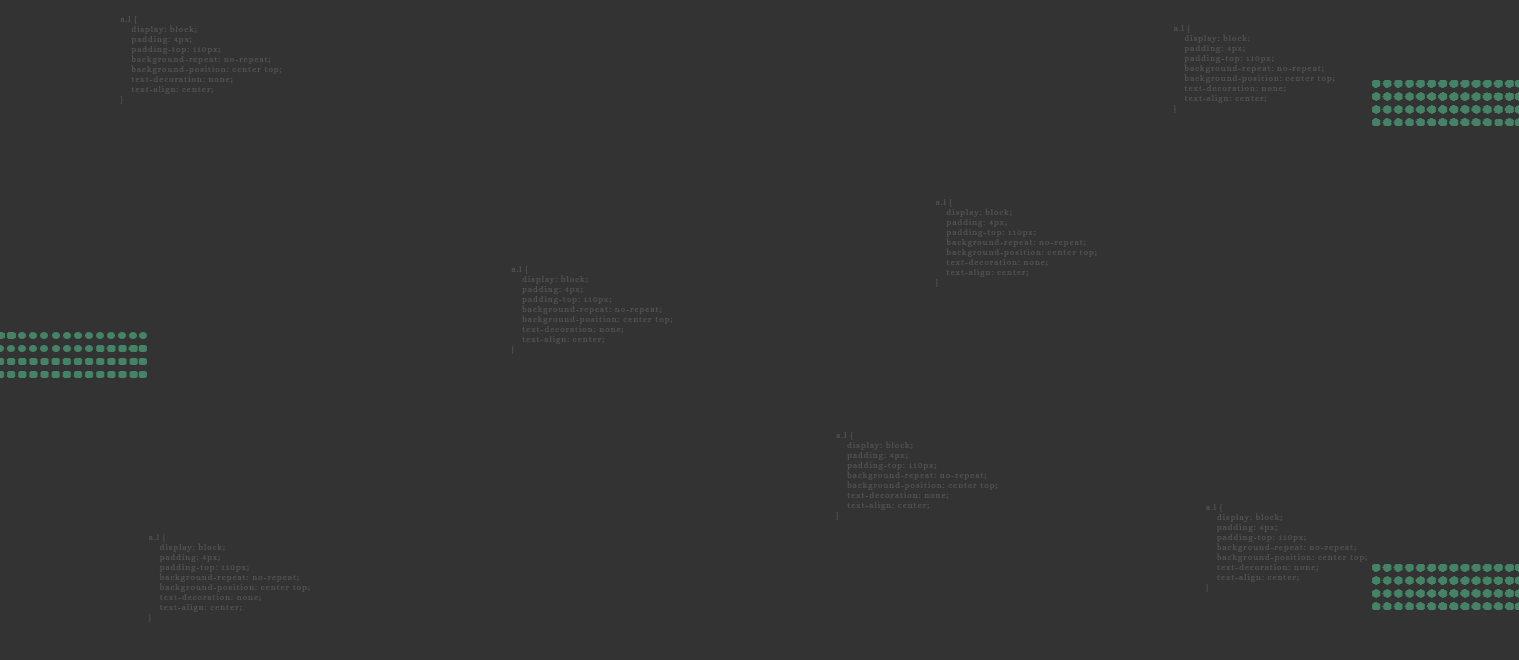
<style>
.page{position:relative;width:1519px;height:660px;background:#333333}
.page>*{position:absolute;margin:0}
.t1{font:8.3px "Alice-Regular";letter-spacing:0.1em;color:#525252}
</style>
<div class="page">
<p class="t1" style="left:120px;top:16px;width:162px;height:88px">a.l {<br>    display: block;<br>    padding: 4px;<br>    padding-top: 110px;<br>    background-repeat: no-repeat;<br>    background-position: center top;<br>    text-decoration: none;<br>    text-align: center;<br>}</p>
<p class="t1" style="left:1173px;top:25px;width:162px;height:88px">a.l {<br>    display: block;<br>    padding: 4px;<br>    padding-top: 110px;<br>    background-repeat: no-repeat;<br>    background-position: center top;<br>    text-decoration: none;<br>    text-align: center;<br>}</p>
<p class="t1" style="left:935px;top:199px;width:162px;height:88px">a.l {<br>    display: block;<br>    padding: 4px;<br>    padding-top: 110px;<br>    background-repeat: no-repeat;<br>    background-position: center top;<br>    text-decoration: none;<br>    text-align: center;<br>}</p>
<p class="t1" style="left:511px;top:266px;width:162px;height:88px">a.l {<br>    display: block;<br>    padding: 4px;<br>    padding-top: 110px;<br>    background-repeat: no-repeat;<br>    background-position: center top;<br>    text-decoration: none;<br>    text-align: center;<br>}</p>
<p class="t1" style="left:836px;top:432px;width:162px;height:88px">a.l {<br>    display: block;<br>    padding: 4px;<br>    padding-top: 110px;<br>    background-repeat: no-repeat;<br>    background-position: center top;<br>    text-decoration: none;<br>    text-align: center;<br>}</p>
<p class="t1" style="left:1206px;top:504px;width:161px;height:88px">a.l {<br>    display: block;<br>    padding: 4px;<br>    padding-top: 110px;<br>    background-repeat: no-repeat;<br>    background-position: center top;<br>    text-decoration: none;<br>    text-align: center;<br>}</p>
<p class="t1" style="left:148px;top:534px;width:162px;height:88px">a.l {<br>    display: block;<br>    padding: 4px;<br>    padding-top: 110px;<br>    background-repeat: no-repeat;<br>    background-position: center top;<br>    text-decoration: none;<br>    text-align: center;<br>}</p>
</div>
